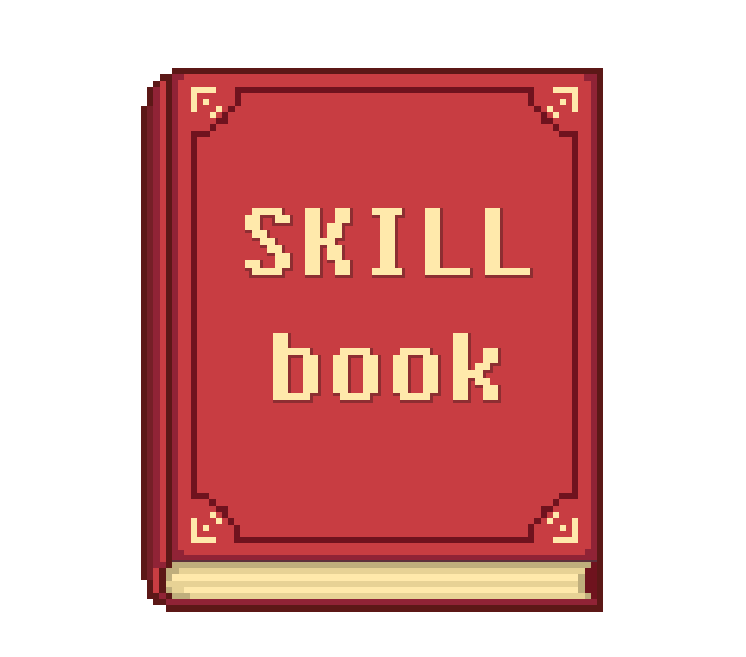
<style>
.page{position:relative;width:746px;height:657px;background:#ffffff}
.page>*{position:absolute;margin:0}
.t1{font:120px "Fixedsys";color:#ffe9ab}
</style>
<div class="page">
<p class="t1" style="left:245px;top:208px;width:285px;height:67px">SKILL</p>
<p class="t1" style="left:273px;top:333px;width:225px;height:67px">book</p>
</div>
